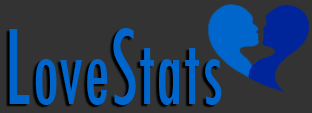
<style>
.page{position:relative;width:312px;height:113px;background:#333333}
.page>*{position:absolute;margin:0}
.t1{font:103.4px "TwCenMT-Condensed";color:#0066cc;scale:0.72 1}
.t2{font:120.4px "TwCenMT-Condensed";color:#0066cc;scale:0.72 1}
</style>
<div class="page">
<p class="t1" style="left:9px;top:28px;width:213px;height:77px"><span class="t2">L</span>ove<span class="t2">S</span>tats</p>
</div>
